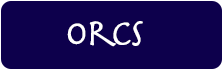
<style>
.page{position:relative;width:224px;height:71px;background:#0d004c}
.page>*{position:absolute;margin:0}
.t1{font:38px "Herculanum";letter-spacing:-0.075em;color:#ffffff}
</style>
<div class="page">
<p class="t1" style="left:67px;top:21px;width:76px;height:26px">Orcs</p>
</div>
